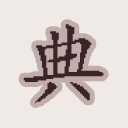
<style>
.page{position:relative;width:128px;height:128px;background:#f0eae7}
.page>*{position:absolute;margin:0}
.t1{font:90px "¿¬Ìå";color:#392529}
</style>
<div class="page">
<p class="t1" style="left:23px;top:24px;width:81px;height:79px">典</p>
</div>
